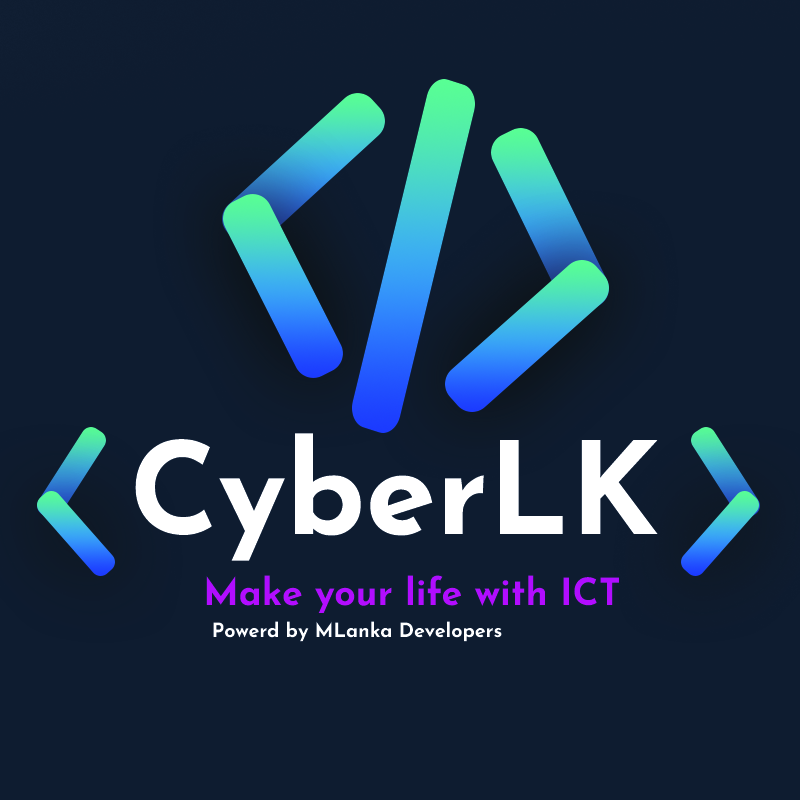
<style>
.page{position:relative;width:800px;height:800px;background:#0e1c30}
.page>*{position:absolute;margin:0}
.t1{font:127.3px "JosefinSans-Bold";color:#ffffff}
.t2{font:37.5px "JosefinSans-Bold";color:#b20dff}
.t3{font:19.7px "JosefinSans-Bold";color:#ffffff}
</style>
<div class="page">
<p class="t1" style="left:135px;top:433px;width:523px;height:128px">CyberLK</p>
<p class="t2" style="left:206px;top:575px;width:413px;height:38px">Make your life with ICT</p>
<p class="t3" style="left:213px;top:621px;width:289px;height:21px">Powerd by MLanka Developers</p>
</div>
